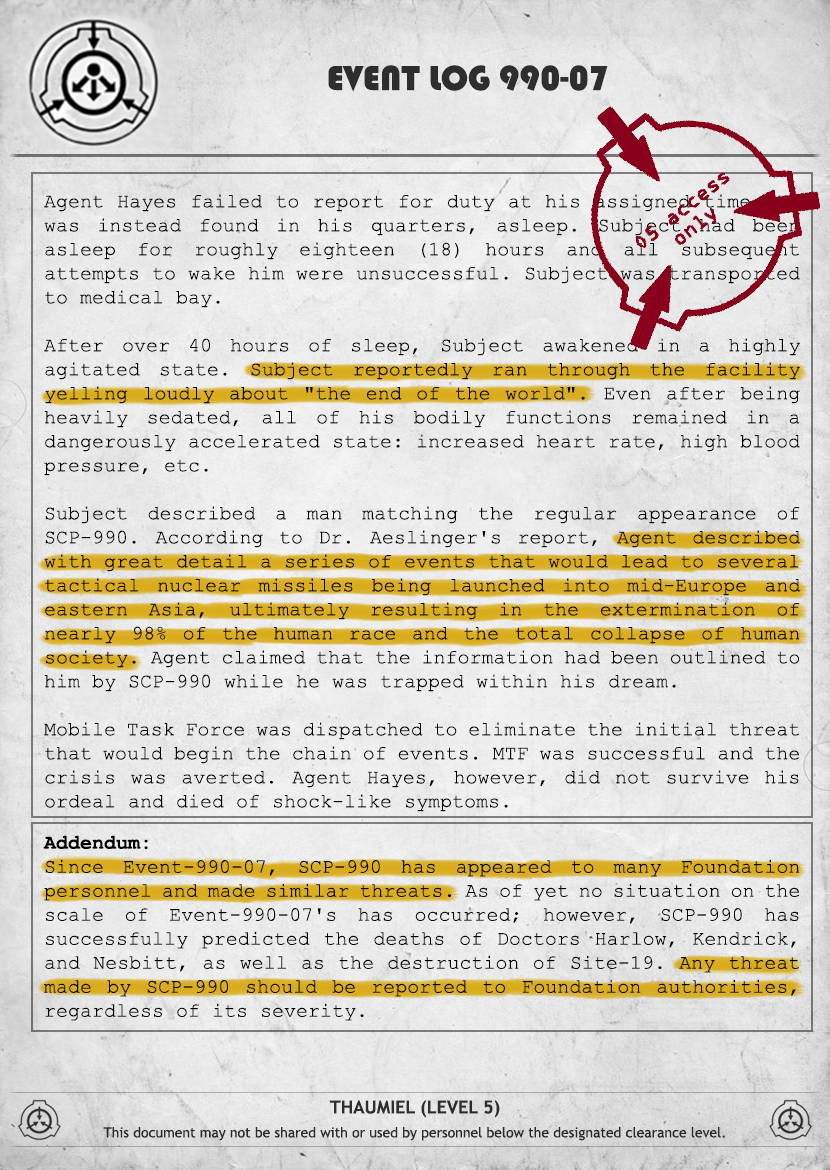
<style>
.page{position:relative;width:830px;height:1170px}
.page>*{position:absolute;margin:0}
.t1{font:36px "Bauhaus93";color:#333333;text-transform:uppercase}
.t2{font:20px "CourierNewPSMT";color:#000000}
.t3{font:20px "CourierNewPS-BoldMT";color:#000000}
.t4{font:14px/24px "TrebuchetMS";color:#333333}
.t5{font:18px/24px "TrebuchetMS-Bold";color:#333333}
</style>
<div class="page">
<p class="t1" style="left:328px;top:65px;width:280px;height:27px">Event log 990-07</p>
<p class="t2" style="left:44px;top:194px;width:757px;height:618px;text-align:justify">Agent Hayes failed to report for duty at his assigned time. He was instead found in his quarters, asleep. Subject had been asleep for roughly eighteen (18) hours and all subsequent attempts to wake him were unsuccessful. Subject was transported to medical bay.<br><br>After over 40 hours of sleep, Subject awakened in a highly agitated state. Subject reportedly ran through the facility yelling loudly about "the end of the world". Even after being heavily sedated, all of his bodily functions remained in a dangerously accelerated state: increased heart rate, high blood pressure, etc.<br><br>Subject described a man matching the regular appearance of SCP-990. According to Dr. Aeslinger's report, Agent described with great detail a series of events that would lead to several tactical nuclear missiles being launched into mid-Europe and eastern Asia, ultimately resulting in the extermination of nearly 98% of the human race and the total collapse of human society. Agent claimed that the information had been outlined to him by SCP-990 while he was trapped within his dream.<br><br>Mobile Task Force was dispatched to eliminate the initial threat that would begin the chain of events. MTF was successful and the crisis was averted. Agent Hayes, however, did not survive his ordeal and died of shock-like symptoms.</p>
<p class="t2" style="left:43px;top:835px;width:757px;height:186px;text-align:justify"><span class="t3">Addendum:<br></span>Since Event-990-07, SCP-990 has appeared to many Foundation personnel and made similar threats. As of yet no situation on the scale of Event-990-07's has occurred; however, SCP-990 has successfully predicted the deaths of Doctors Harlow, Kendrick, and Nesbitt, as well as the destruction of Site-19. Any threat made by SCP-990 should be reported to Foundation authorities, regardless of its severity.</p>
<p class="t4" style="left:103px;top:1100px;width:622px;height:41px;text-align:center"><span class="t5">THAUMIEL (LEVEL 5)<br></span>This document may not be shared with or used by personnel below the designated clearance level.</p>
</div>
